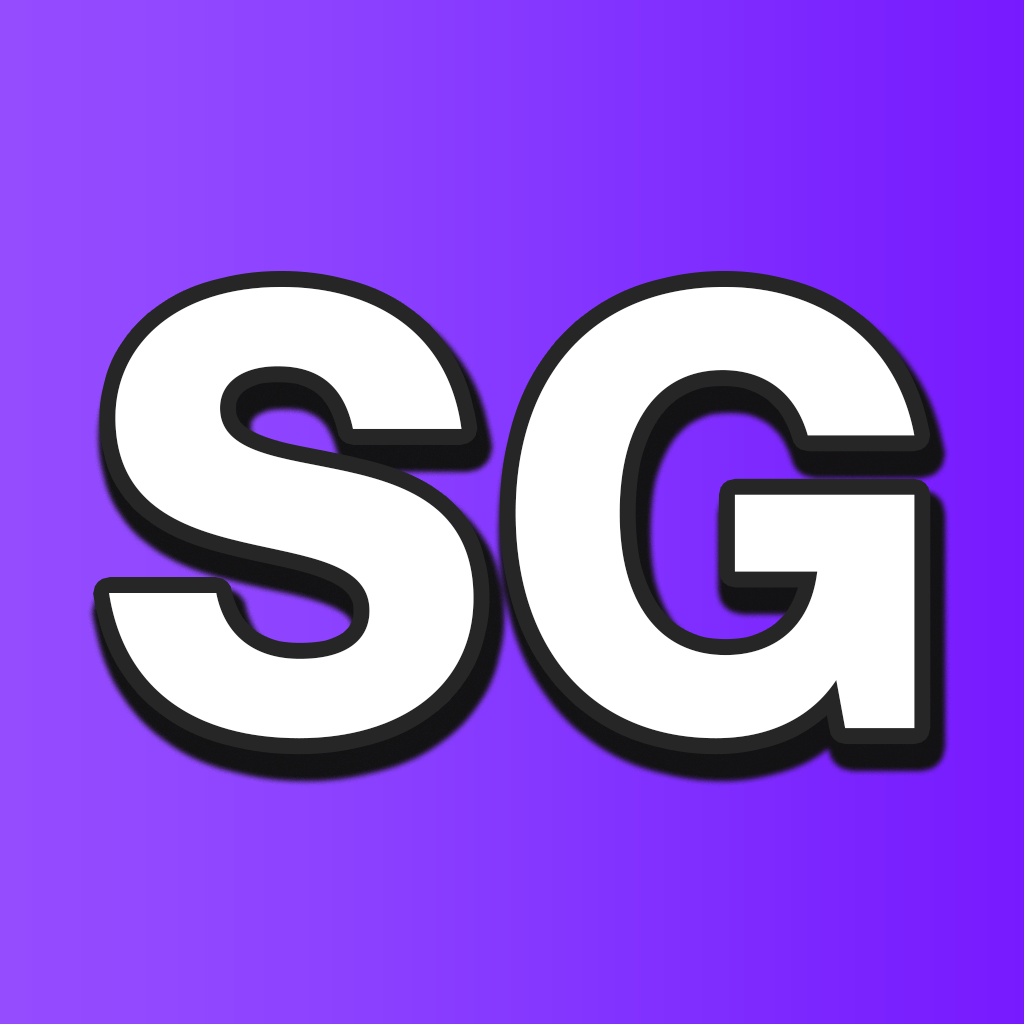
<style>
.page{position:relative;width:1024px;height:1024px}
.page>*{position:absolute;margin:0}
.t1{font:633.6px "Switzer-Bold";color:#ffffff}
</style>
<div class="page">
<p class="t1" style="left:109px;top:286px;width:806px;height:453px">SG</p>
</div>
